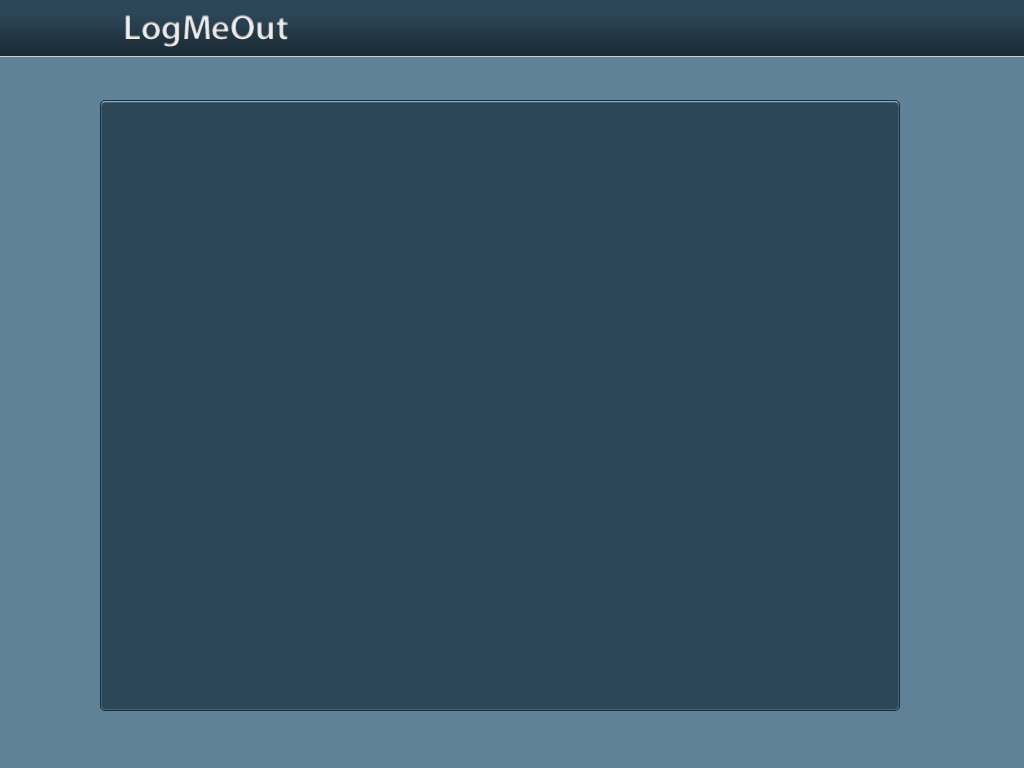
<style>
.page{position:relative;width:1024px;height:768px;background:#2c4758}
.page>*{position:absolute;margin:0}
.t1{font:36px "MyriadPro-Semibold";color:#eeeeee}
</style>
<div class="page">
<p class="t1" style="left:125px;top:14px;width:163px;height:33px">LogMeOut</p>
</div>
